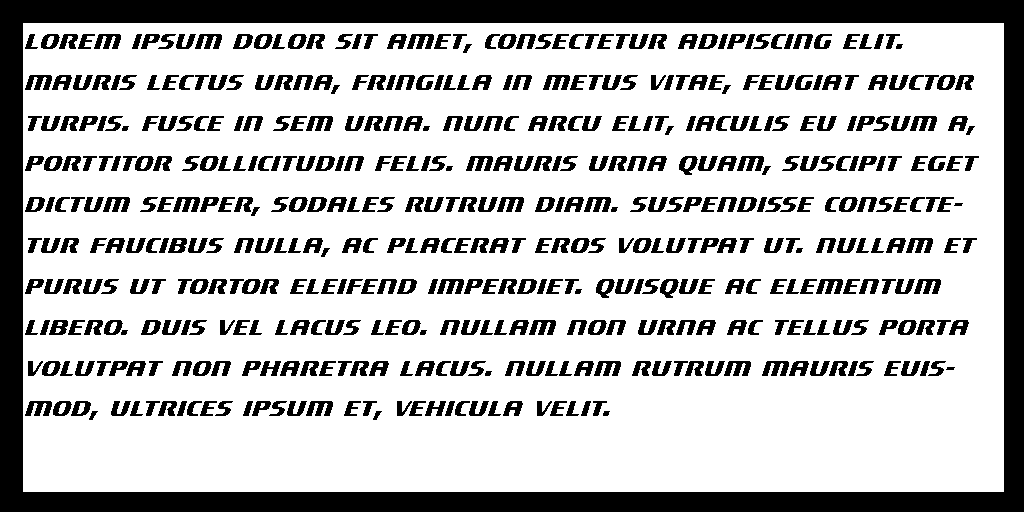
<style>
.page{position:relative;width:1024px;height:512px;background:#ffffff}
.page>*{position:absolute;margin:0}
.t1{font:34px "Motorwerk";color:#000000}
</style>
<div class="page">
<p class="t1" style="left:25px;top:34px;width:954px;height:386px">Lorem ipsum dolor sit amet, consectetur adipiscing elit. Mauris lectus urna, fringilla in metus vitae, feugiat auctor turpis. Fusce in sem urna. Nunc arcu elit, iaculis eu ipsum a, porttitor sollicitudin felis. Mauris urna quam, suscipit eget dictum semper, sodales rutrum diam. Suspendisse consectetur faucibus nulla, ac placerat eros volutpat ut. Nullam et purus ut tortor eleifend imperdiet. Quisque ac elementum libero. Duis vel lacus leo. Nullam non urna ac tellus porta volutpat non pharetra lacus. Nullam rutrum mauris euismod, ultrices ipsum et, vehicula velit.</p>
</div>
